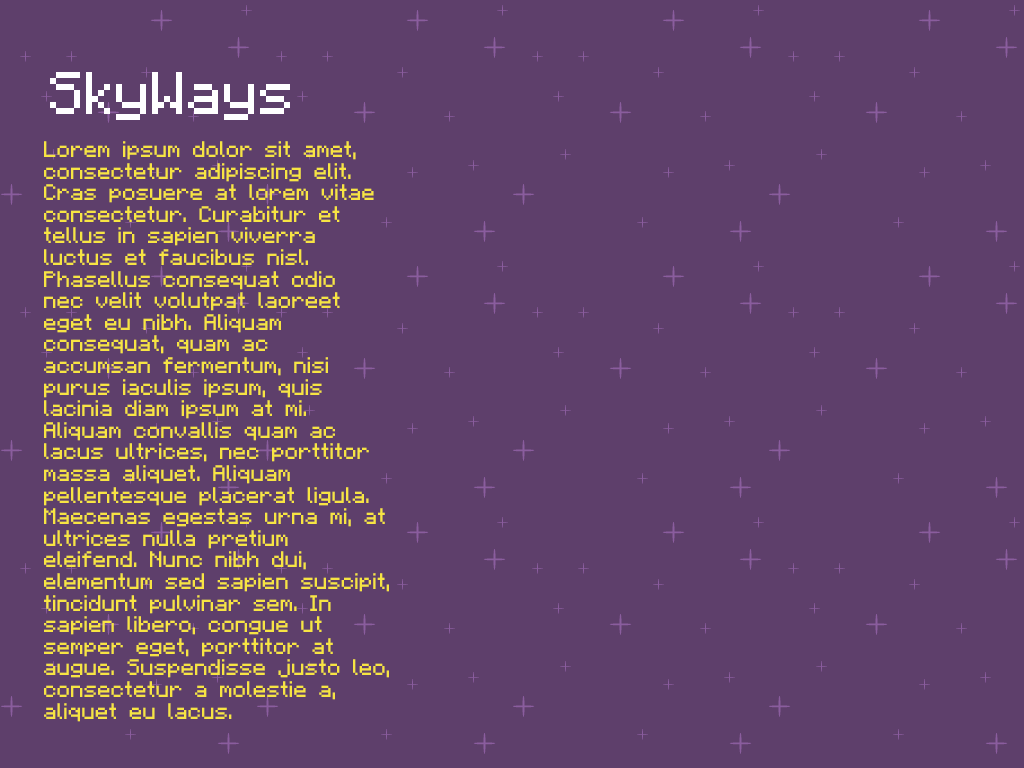
<style>
.page{position:relative;width:1024px;height:768px;background:#5e3f6b}
.page>*{position:absolute;margin:0}
.t1{font:48px "Minecraftia";color:#ffffff}
.t2{font:18px "Minecraftia";color:#f7e443}
</style>
<div class="page">
<p class="t1" style="left:50px;top:72px;width:240px;height:48px">SkyWays</p>
<p class="t2" style="left:44px;top:141px;width:345px;height:581px">Lorem ipsum dolor sit amet,<br>consectetur adipiscing elit.<br>Cras posuere at lorem vitae<br>consectetur. Curabitur et<br>tellus in sapien viverra <br>luctus et faucibus nisl. <br>Phasellus consequat odio <br>nec velit volutpat laoreet <br>eget eu nibh. Aliquam <br>consequat, quam ac <br>accumsan fermentum, nisi <br>purus iaculis ipsum, quis <br>lacinia diam ipsum at mi. <br>Aliquam convallis quam ac <br>lacus ultrices, nec porttitor <br>massa aliquet. Aliquam <br>pellentesque placerat ligula.<br>Maecenas egestas urna mi, at<br>ultrices nulla pretium <br>eleifend. Nunc nibh dui, <br>elementum sed sapien suscipit, <br>tincidunt pulvinar sem. In <br>sapien libero, congue ut <br>semper eget, porttitor at <br>augue. Suspendisse justo leo, <br>consectetur a molestie a, <br>aliquet eu lacus.</p>
</div>
